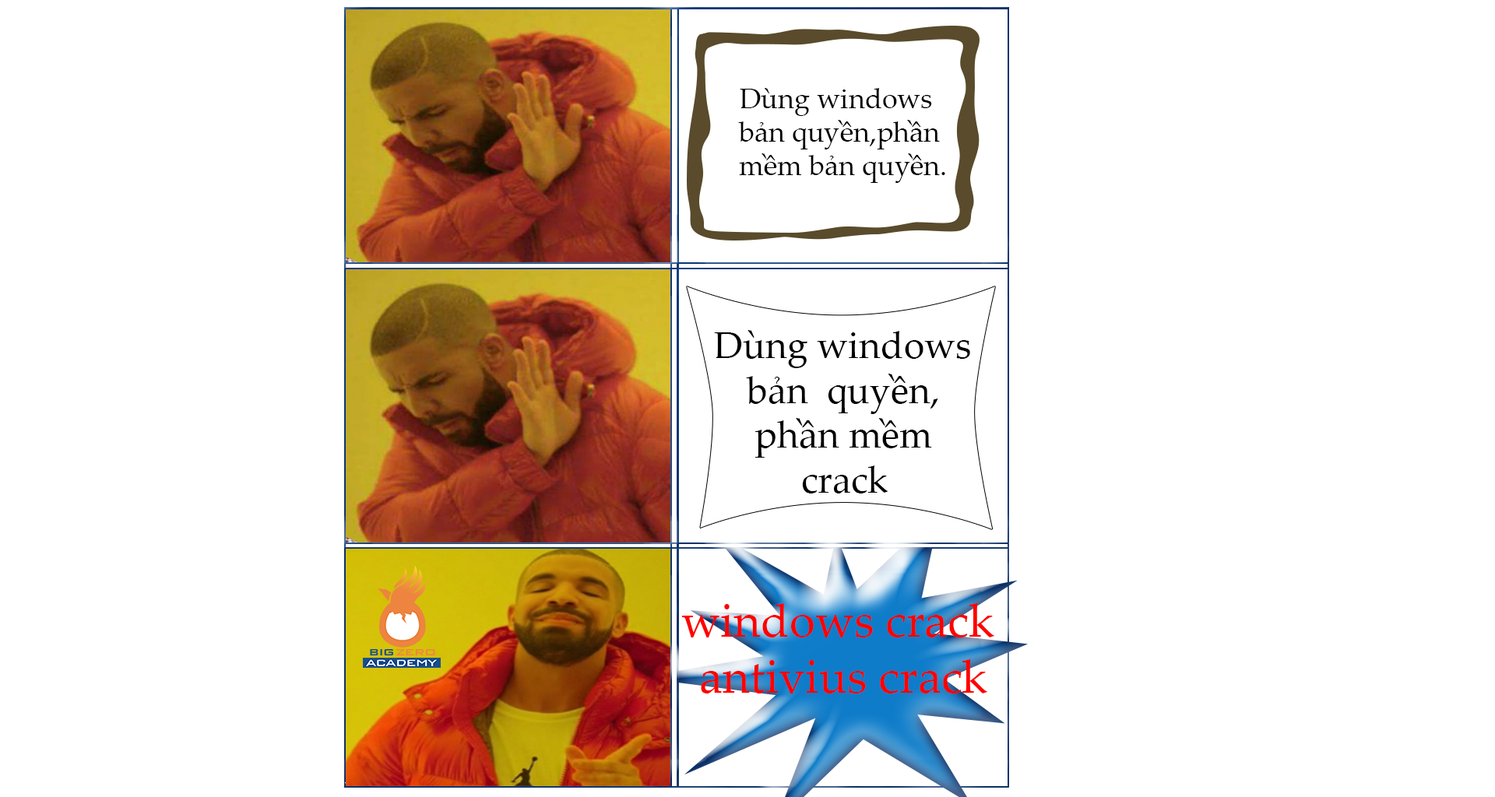
<style>
.page{position:relative;width:1495px;height:797px;background:#ffffff}
.page>*{position:absolute;margin:0}
.t1{font:28px "PalatinoLinotype-Roman";color:#000000}
.t2{font:37.4px "PalatinoLinotype-Roman";color:#000000}
.t3{font:46.7px "PalatinoLinotype-Roman";color:#ff0000}
</style>
<div class="page">
<p class="t1" style="left:738px;top:88px;width:207px;height:95px;text-align:center">Dùng windows <br>bản quyền,phần<br> mềm bản quyền.</p>
<p class="t2" style="left:714px;top:330px;width:256px;height:164px;text-align:center">Dùng windows bản  quyền, phần mềm crack</p>
<p class="t3" style="left:681px;top:604px;width:314px;height:90px;text-align:center">windows crack<br> antivius crack</p>
</div>
